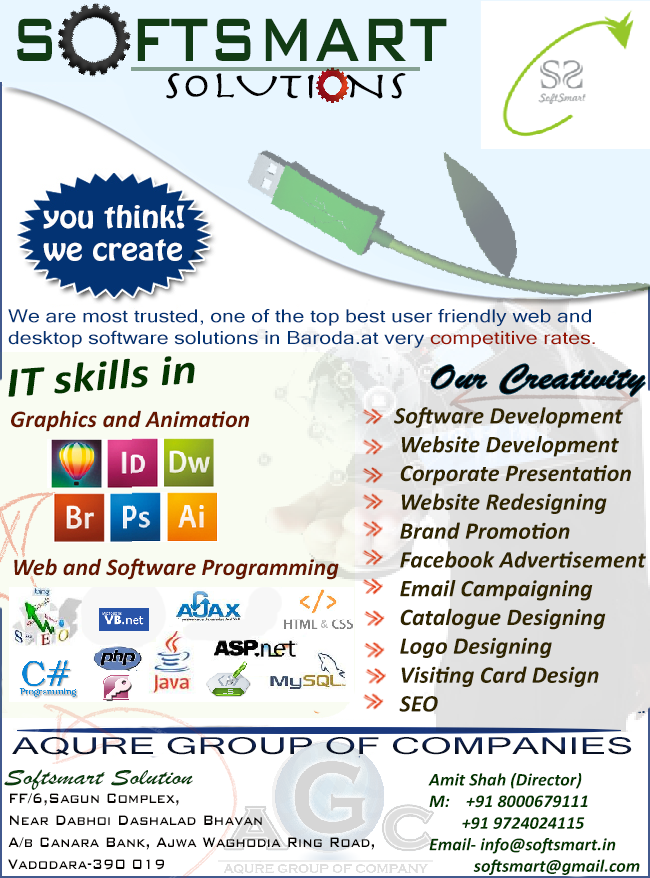
<style>
.page{position:relative;width:650px;height:878px;background:#ffffff}
.page>*{position:absolute;margin:0}
.t1{font:81.7px "BankGothic-Medium";color:#113b14;scale:0.74 1}
.t2{font:39.2px "Herculanum";color:#020101;scale:1.23 1}
.t3{font:27px "HoboStd";color:#fdfdfd;scale:1.18 1}
.t4{font:18.1px "MicrosoftSansSerif";color:#033373;scale:1.18 1}
.t5{font:18.1px "MicrosoftSansSerif";color:#961504;scale:1.18 1}
.t6{font:42.7px "Calibri-BoldItalic";color:#033600;scale:1.12 1}
.t7{font:36px "BrushScriptMT";color:#030303;scale:1.25 1}
.t8{font:24px "Calibri-BoldItalic";color:#661600}
.t9{font:24px "Calibri-BoldItalic";color:#302500}
.t10{font:23.3px "MicrosoftSansSerif";scale:1.73 1}
.t11{font:24px "BrushScriptMT";color:#093d0c;scale:1.25 1}
.t12{font:18px "Calibri-BoldItalic";color:#033600}
.t13{font:18.3px "BankGothic-Medium";color:#060301;scale:0.8 1}
</style>
<div class="page">
<p class="t1" style="left:17px;top:18px;width:430px;height:43px">S   FTSMART</p>
<p class="t2" style="left:166px;top:73px;width:240px;height:26px">SOLUTI  NS</p>
<p class="t3" style="left:43px;top:205px;width:142px;height:56px">you think!<br>we create</p>
<p class="t4" style="left:8px;top:309px;width:587px;height:39px">We are most trusted, one of the top best user friendly web and <br>desktop software solutions in Baroda.at very <span class="t5">competitive rates.</span></p>
<p class="t6" style="left:8px;top:356px;width:187px;height:41px;rotate:-4deg">IT skills in</p>
<p class="t7" style="left:431px;top:364px;width:214px;height:32px">Our Creativity</p>
<p class="t8" style="left:11px;top:410px;width:239px;height:22px">Graphics and Animation</p>
<p class="t9" style="left:394px;top:407px;width:252px;height:305px">Software Development<br> Website Development<br> Corporate Presentation<br> Website Redesigning<br> Brand Promotion<br> Facebook Advertisement<br> Email Campaigning<br> Catalogue Designing<br> Logo Designing<br> Visiting Card Design<br> SEO</p>
<p class="t8" style="left:14px;top:558px;width:325px;height:22px">Web and Software Programming</p>
<p class="t10" style="left:12px;top:737px;width:620px;height:19px">AQURE GROUP OF COMPANIES</p>
<p class="t11" style="left:4px;top:769px;width:189px;height:21px">Softsmart Solution</p>
<p class="t12" style="left:428px;top:773px;width:212px;height:102px">Amit Shah (Director)<br>M:    +91 8000679111<br>        +91 9724024115<br>Email- info@softsmart.in<br>           softsmart@gmail.com</p>
<p class="t13" style="left:8px;top:793px;width:366px;height:77px">FF/6,Sagun Complex,<br>Near Dabhoi Dashalad Bhavan<br>A/b Canara Bank, Ajwa Waghodia Ring Road,<br>Vadodara-390 019</p>
</div>
